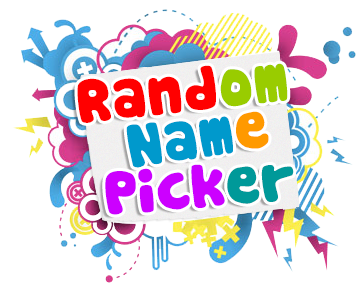
<style>
.page{position:relative;width:364px;height:292px;background:#ffffff}
.page>*{position:absolute;margin:0}
.t1{font:60px "Cookies";color:#ff0000}
.t2{font:60px "Cookies";color:#99cc00}
.t3{font:60px "Cookies";color:#0099cc}
.t4{font:60px "Cookies";color:#ff9900}
.t5{font:60px "Cookies";color:#cc00ff}
.t6{font:60px "Cookies";color:#009999}
</style>
<div class="page">
<p class="t1" style="left:77px;top:63px;width:211px;height:60px;rotate:-6deg">Rand<span class="t2">om</span></p>
<p class="t3" style="left:126px;top:111px;width:143px;height:57px;rotate:-9deg">Nam<span class="t4">e</span></p>
<p class="t5" style="left:105px;top:164px;width:189px;height:51px;rotate:-5deg">Pick<span class="t6">er</span></p>
</div>
